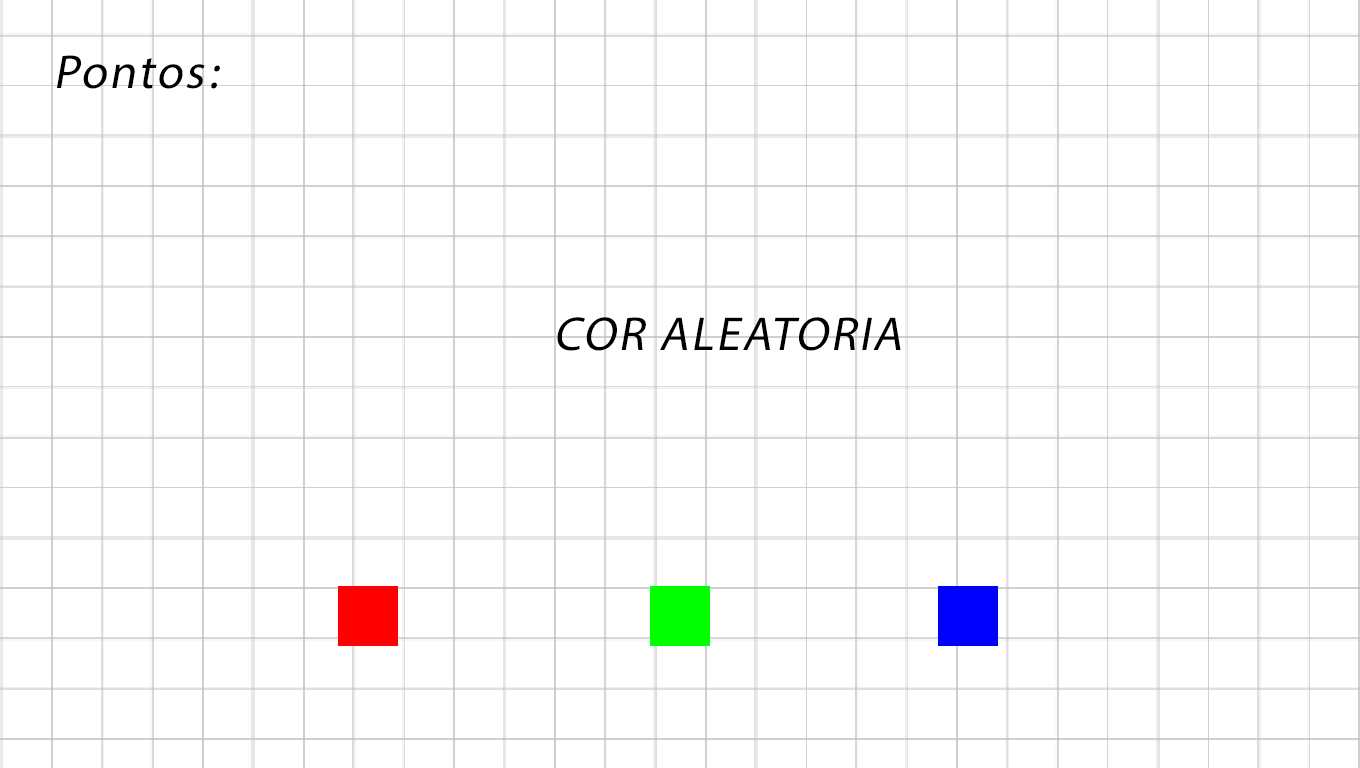
<style>
.page{position:relative;width:1360px;height:768px;background:#ffffff}
.page>*{position:absolute;margin:0}
.t1{font:48px "MyriadPro-Regular";letter-spacing:0.05em;color:#000000;font-style:italic}
</style>
<div class="page">
<p class="t1" style="left:57px;top:55px;width:163px;height:34px">:Pontos</p>
<p class="t1" style="left:557px;top:317px;width:344px;height:34px">COR ALEATORIA</p>
</div>
